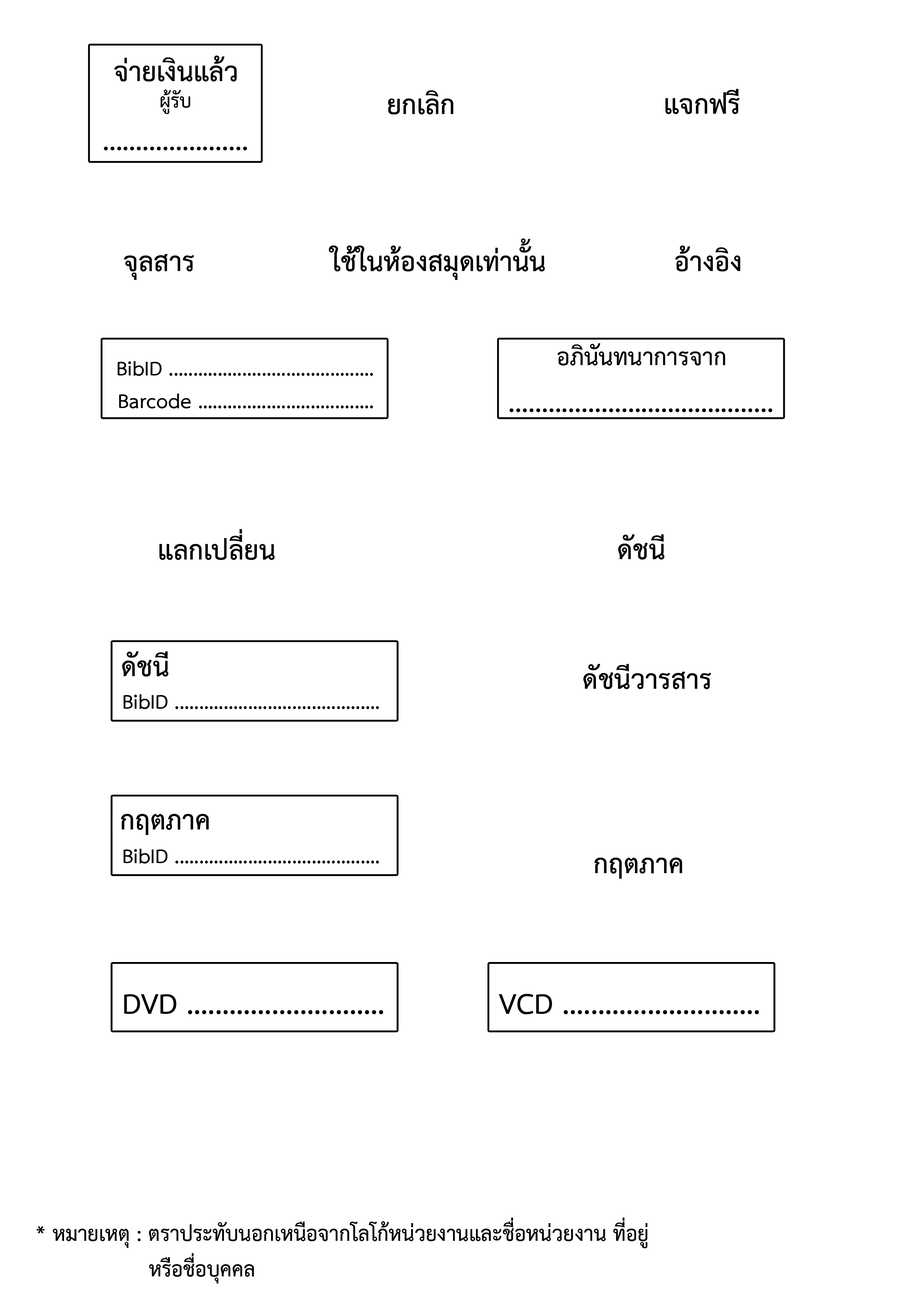
<style>
.page{position:relative;width:918px;height:1299px;background:#ffffff}
.page>*{position:absolute;margin:0}
.t1{font:38.6px "THSarabunPSK-Bold";color:#000000}
.t2{font:26.9px "THSarabunPSK-Bold";color:#000000}
.t3{font:33.6px "THSarabunPSK-Bold";color:#000000}
.t4{font:28.5px "THSarabunPSK-Bold";color:#000000}
.t5{font:41.2px "THSarabunPSK-Bold";color:#000000}
.t6{font:29.5px "THSarabunPSK-Bold";color:#000000}
</style>
<div class="page">
<p class="t1" style="left:114px;top:56px;width:123px;height:25px">จ่ายเงินแล้ว</p>
<p class="t2" style="left:160px;top:90px;width:30px;height:24px">ผู้รับ</p>
<p class="t1" style="left:665px;top:89px;width:75px;height:25px">แจกฟรี</p>
<p class="t1" style="left:388px;top:90px;width:66px;height:24px">ยกเลิก</p>
<p class="t1" style="left:104px;top:147px;width:143px;height:3px">......................</p>
<p class="t1" style="left:329px;top:238px;width:216px;height:42px">ใช้ในห้องสมุดเท่านั้น</p>
<p class="t1" style="left:675px;top:245px;width:65px;height:26px">อ้างอิง</p>
<p class="t1" style="left:124px;top:254px;width:70px;height:26px">จุลสาร</p>
<p class="t3" style="left:558px;top:343px;width:167px;height:22px">อภินันทนาการจาก</p>
<p class="t4" style="left:117px;top:361px;width:256px;height:15px">BibID ..........................................</p>
<p class="t4" style="left:119px;top:394px;width:254px;height:14px">Barcode ....................................</p>
<p class="t1" style="left:509px;top:408px;width:263px;height:4px">........................................</p>
<p class="t1" style="left:159px;top:529px;width:116px;height:31px">แลกเปลี่ยน</p>
<p class="t1" style="left:618px;top:534px;width:47px;height:25px">ดัชนี</p>
<p class="t1" style="left:122px;top:651px;width:46px;height:25px">ดัชนี</p>
<p class="t1" style="left:583px;top:664px;width:128px;height:25px">ดัชนีวารสาร</p>
<p class="t4" style="left:123px;top:694px;width:256px;height:15px">BibID ..........................................</p>
<p class="t1" style="left:121px;top:814px;width:88px;height:21px">กฤตภาค</p>
<p class="t4" style="left:123px;top:849px;width:256px;height:14px">BibID ..........................................</p>
<p class="t1" style="left:595px;top:857px;width:87px;height:22px">กฤตภาค</p>
<p class="t5" style="left:124px;top:994px;width:259px;height:20px">DVD ............................</p>
<p class="t5" style="left:499px;top:994px;width:260px;height:20px">VCD ............................</p>
<p class="t6" style="left:37px;top:1217px;width:611px;height:66px">* หมายเหตุ : ตราประทับนอกเหนือจากโลโก้หน่วยงานและชื่อหน่วยงาน ที่อยู่<br>                 หรือชื่อบุคคล</p>
</div>
